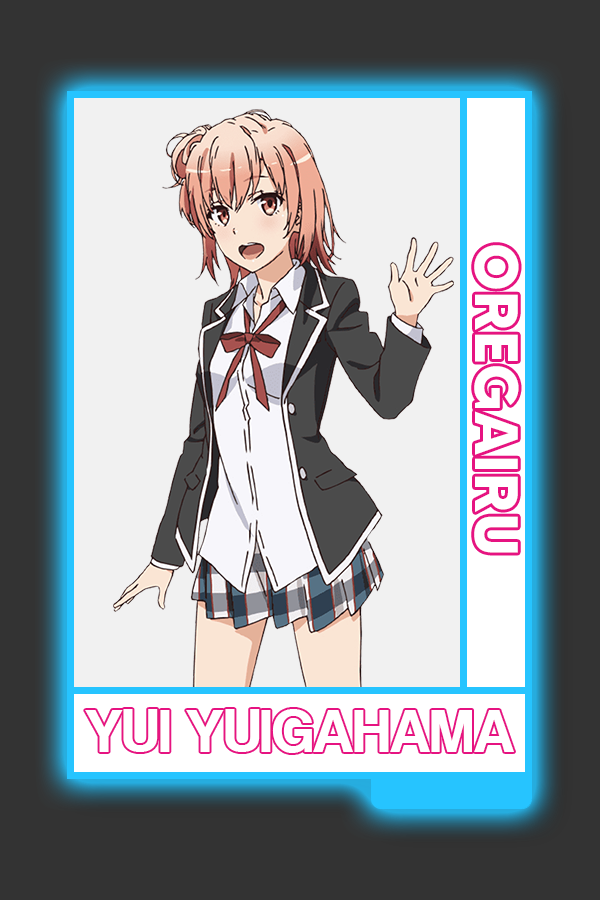
<style>
.page{position:relative;width:600px;height:900px;background:#333333}
.page>*{position:absolute;margin:0}
.t1{font:61.1px "MADETOMMY-Bold";color:#ffffff}
.t2{font:62.6px "CoolveticaRg-Regular";color:#ffffff}
</style>
<div class="page">
<p class="t1" style="left:474px;top:245px;width:45px;height:308px;rotate:90deg">OREGAIRU</p>
<p class="t2" style="left:85px;top:709px;width:429px;height:44px">YUI YUIGAHAMA</p>
</div>
